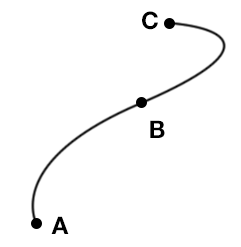
<style>
.page{position:relative;width:241px;height:247px;background:#ffffff}
.page>*{position:absolute;margin:0}
.t1{font:24px "HelveticaNeueLTPro-Bd";letter-spacing:-0.04em;color:#000000}
</style>
<div class="page">
<p class="t1" style="left:142px;top:11px;width:16px;height:19px">C</p>
<p class="t1" style="left:150px;top:120px;width:15px;height:18px">B</p>
<p class="t1" style="left:51px;top:216px;width:18px;height:18px">A</p>
</div>
